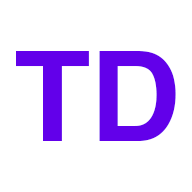
<style>
.page{position:relative;width:192px;height:192px;background:#ffffff}
.page>*{position:absolute;margin:0}
.t1{font:125px "Helvetica-Bold";color:#6200ea}
</style>
<div class="page">
<p class="t1" style="left:16px;top:51px;width:160px;height:90px">TD</p>
</div>
